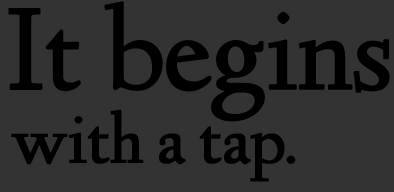
<style>
.page{position:relative;width:394px;height:192px;background:#333333}
.page>*{position:absolute;margin:0}
.t1{font:120px "LindenHill";letter-spacing:-0.03em;color:#000000;font-weight:bold}
.t2{font:72px "LindenHill";letter-spacing:-0.02em;color:#000000;font-weight:bold}
</style>
<div class="page">
<p class="t1" style="left:8px;top:1px;width:382px;height:121px">It begins</p>
<p class="t2" style="left:11px;top:109px;width:285px;height:73px">with a tap.</p>
</div>
